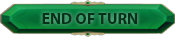
<style>
.page{position:relative;width:175px;height:37px}
.page>*{position:absolute;margin:0}
.t1{font:16px "MyriadPro-Bold";color:#083119}
</style>
<div class="page">
<p class="t1" style="left:42px;top:13px;width:95px;height:11px">END OF TURN</p>
</div>
